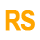
<style>
.page{position:relative;width:40px;height:40px;background:#ffffff}
.page>*{position:absolute;margin:0}
.t1{font:27.8px "Arial-BoldMT";letter-spacing:-0.05em;color:#ffa500;font-weight:bold;scale:0.83 1}
</style>
<div class="page">
<p class="t1" style="left:5px;top:10px;width:30px;height:21px">RS</p>
</div>
